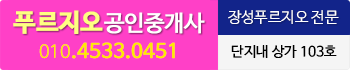
<style>
.page{position:relative;width:350px;height:70px;background:#ff40c7}
.page>*{position:absolute;margin:0}
.t1{font:22.2px "NanumBarunGothicOTF";letter-spacing:-0.025em;color:#ffffff;font-weight:bold}
.t2{font:24.7px "NanumBarunGothicOTFBold";letter-spacing:-0.025em;color:#ffff81;font-weight:bold}
.t3{font:15px "NanumBarunGothicOTFLight";color:#ffffff}
.t4{font:19.5px "NanumBarunGothicOTF";color:#ffe900;font-weight:bold}
.t5{font:17.4px "NanumBarunGothicOTFUltraLight";color:#ffe900;font-weight:bold}
.t6{font:14px "NanumBarunGothicOTF";color:#000000}
</style>
<div class="page">
<p class="t1" style="left:13px;top:10px;width:192px;height:24px"><span class="t2">푸르지오 </span>공인중개사</p>
<p class="t3" style="left:228px;top:10px;width:111px;height:14px">장성푸르지오 전문</p>
<p class="t4" style="left:39px;top:42px;width:136px;height:17px"><span class="t5">010</span>.4533.0451</p>
<p class="t6" style="left:231px;top:45px;width:106px;height:13px">단지내 상가 103호</p>
</div>
